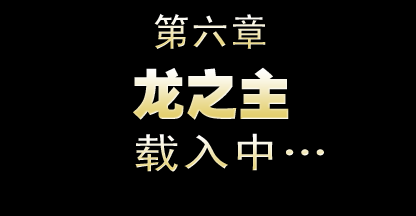
<style>
.page{position:relative;width:416px;height:216px;background:#000000}
.page>*{position:absolute;margin:0}
.t1{font:38px "SimHei";letter-spacing:0.03em;text-transform:uppercase}
.t2{font:53px "HeitiEG-Ultra-GB";text-transform:uppercase}
.t3{font:40.9px "SimHei";letter-spacing:0.03em;scale:1.18 1}
</style>
<div class="page">
<p class="t1" style="left:154px;top:13px;width:112px;height:36px">第六章</p>
<p class="t2" style="left:133px;top:67px;width:156px;height:53px">龙之主</p>
<p class="t3" style="left:135px;top:133px;width:189px;height:39px">载入中…</p>
</div>
